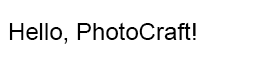
<style>
.page{position:relative;width:256px;height:64px;background:#ffffff}
.page>*{position:absolute;margin:0}
.t1{font:24px "ArialMT";color:#000000}
</style>
<div class="page">
<p class="t1" style="left:9px;top:22px;width:187px;height:22px">Hello, PhotoCraft!</p>
</div>
